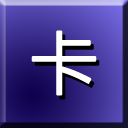
<style>
.page{position:relative;width:128px;height:128px}
.page>*{position:absolute;margin:0}
.t1{font:72px "MicrosoftJhengHeiRegular";color:#ffffff;font-weight:bold}
</style>
<div class="page">
<p class="t1" style="left:31px;top:30px;width:66px;height:66px">卡</p>
</div>
